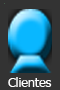
<style>
.page{position:relative;width:60px;height:90px;background:#333333}
.page>*{position:absolute;margin:0}
.t1{font:12.5px "Tahoma";color:#ffffff}
</style>
<div class="page">
<p class="t1" style="left:8px;top:77px;width:44px;height:10px">Clientes</p>
</div>
